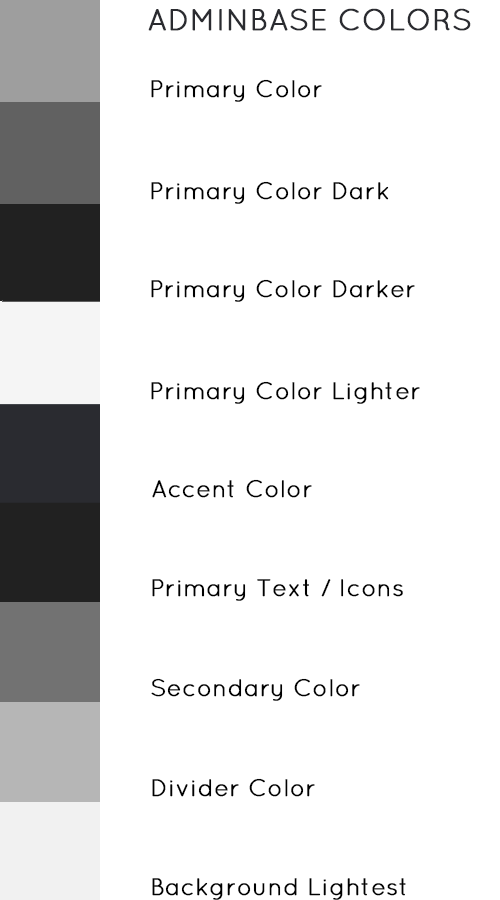
<style>
.page{position:relative;width:500px;height:900px;background:#ffffff}
.page>*{position:absolute;margin:0}
.t1{font:30px "Quicksand-Regular";color:#2a2b30;font-weight:bold}
.t2{font:24px "Quicksand-Regular";color:#000000;font-weight:bold}
</style>
<div class="page">
<p class="t1" style="left:148px;top:8px;width:323px;height:23px">ADMINBASE COLORS</p>
<p class="t2" style="left:151px;top:79px;width:171px;height:23px">Primary Color</p>
<p class="t2" style="left:151px;top:181px;width:238px;height:23px">Primary Color Dark</p>
<p class="t2" style="left:151px;top:279px;width:264px;height:23px">Primary Color Darker</p>
<p class="t2" style="left:151px;top:381px;width:269px;height:23px">Primary Color Lighter</p>
<p class="t2" style="left:152px;top:479px;width:160px;height:19px">Accent Color</p>
<p class="t2" style="left:152px;top:579px;width:251px;height:22px">Primary Text / Icons</p>
<p class="t2" style="left:151px;top:678px;width:209px;height:23px">Secondary Color</p>
<p class="t2" style="left:152px;top:778px;width:163px;height:19px">Divider Color</p>
<p class="t2" style="left:152px;top:878px;width:254px;height:22px">Background Lightest</p>
</div>
